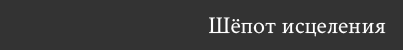
<style>
.page{position:relative;width:403px;height:50px;background:#333333}
.page>*{position:absolute;margin:0}
.t1{font:24px "CrimsonText-Regular";color:#ffffff}
</style>
<div class="page">
<p class="t1" style="left:209px;top:17px;width:177px;height:20px">Шёпот исцеления</p>
</div>
